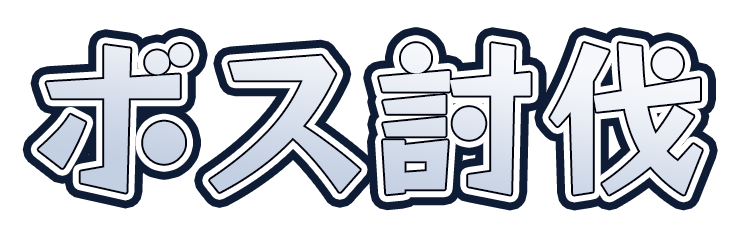
<style>
.page{position:relative;width:740px;height:238px;background:#ffffff}
.page>*{position:absolute;margin:0}
.t1{font:166.7px "RocknRollOne-Regular";color:#dee5ef;font-weight:bold}
</style>
<div class="page">
<p class="t1" style="left:38px;top:43px;width:664px;height:152px">ボス討伐</p>
</div>
